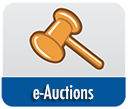
<style>
.page{position:relative;width:128px;height:109px}
.page>*{position:absolute;margin:0}
.t1{font:19.2px "Futura-CondensedMedium";color:#ffffff}
</style>
<div class="page">
<p class="t1" style="left:33px;top:84px;width:61px;height:16px">e-Auctions</p>
</div>
